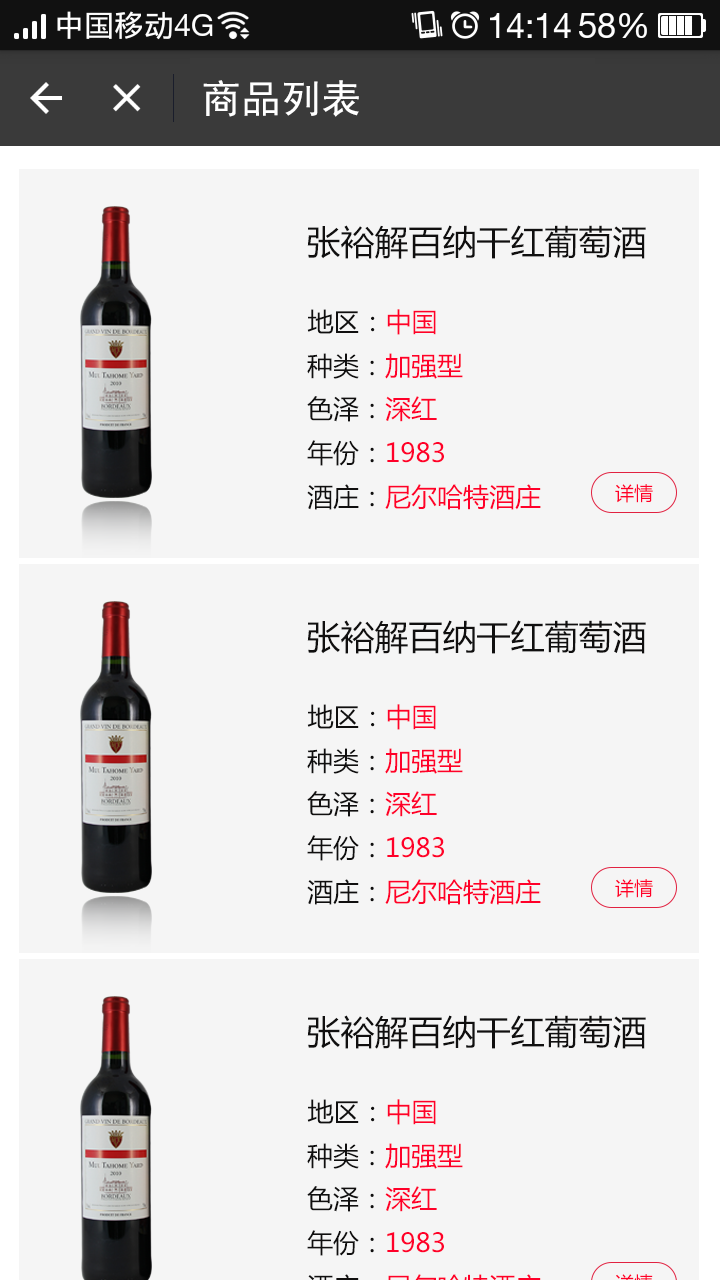
<style>
.page{position:relative;width:720px;height:1280px;background:#f5f5f5}
.page>*{position:absolute;margin:0}
.t1{font:40px "SimHei";color:#ffffff}
.t2{font:34px "MicrosoftYaHei";color:#100f0f;text-transform:uppercase}
.t3{font:26px "MicrosoftYaHei";color:#100f0f;text-transform:uppercase}
.t4{font:26px "MicrosoftYaHei";color:#ff0029;text-transform:uppercase}
.t5{font:19px "MicrosoftYaHei";color:#ff0029;text-transform:uppercase}
</style>
<div class="page">
<p class="t1" style="left:203px;top:80px;width:156px;height:37px">商品列表</p>
<p class="t2" style="left:307px;top:225px;width:339px;height:34px">张裕解百纳干红葡萄酒</p>
<p class="t3" style="left:307px;top:309px;width:129px;height:26px">地区：<span class="t4">中国</span></p>
<p class="t3" style="left:307px;top:353px;width:156px;height:26px">种类：<span class="t4">加强型</span></p>
<p class="t3" style="left:307px;top:396px;width:130px;height:26px">色泽：<span class="t4">深红</span></p>
<p class="t4" style="left:307px;top:440px;width:137px;height:26px"><span class="t3">年份：</span>1983</p>
<p class="t4" style="left:307px;top:484px;width:234px;height:26px"><span class="t3">酒庄：</span>尼尔哈特酒庄</p>
<p class="t5" style="left:615px;top:484px;width:38px;height:19px">详情</p>
<p class="t2" style="left:307px;top:620px;width:339px;height:34px">张裕解百纳干红葡萄酒</p>
<p class="t3" style="left:307px;top:704px;width:129px;height:26px">地区：<span class="t4">中国</span></p>
<p class="t3" style="left:307px;top:748px;width:156px;height:26px">种类：<span class="t4">加强型</span></p>
<p class="t3" style="left:307px;top:791px;width:130px;height:26px">色泽：<span class="t4">深红</span></p>
<p class="t4" style="left:307px;top:835px;width:137px;height:26px"><span class="t3">年份：</span>1983</p>
<p class="t4" style="left:307px;top:879px;width:234px;height:26px"><span class="t3">酒庄：</span>尼尔哈特酒庄</p>
<p class="t5" style="left:615px;top:879px;width:38px;height:19px">详情</p>
<p class="t2" style="left:307px;top:1015px;width:339px;height:34px">张裕解百纳干红葡萄酒</p>
<p class="t3" style="left:307px;top:1099px;width:129px;height:26px">地区：<span class="t4">中国</span></p>
<p class="t3" style="left:307px;top:1143px;width:156px;height:26px">种类：<span class="t4">加强型</span></p>
<p class="t3" style="left:307px;top:1186px;width:130px;height:26px">色泽：<span class="t4">深红</span></p>
<p class="t4" style="left:307px;top:1230px;width:137px;height:26px"><span class="t3">年份：</span>1983</p>
</div>
